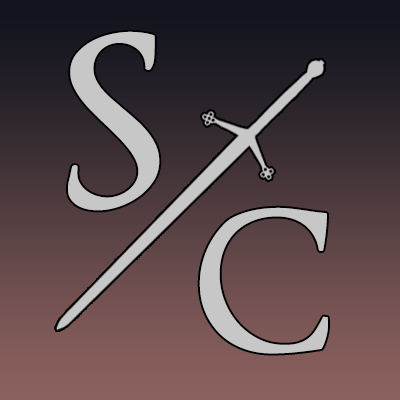
<style>
.page{position:relative;width:400px;height:400px}
.page>*{position:absolute;margin:0}
.t1{font:230px "OptimusPrincepsSemiBold";color:#c7c7c7}
.t2{font:190px "OptimusPrincepsSemiBold";color:#c7c7c7}
</style>
<div class="page">
<p class="t1" style="left:68px;top:31px;width:92px;height:180px">S</p>
<p class="t2" style="left:199px;top:207px;width:129px;height:147px">C</p>
</div>
